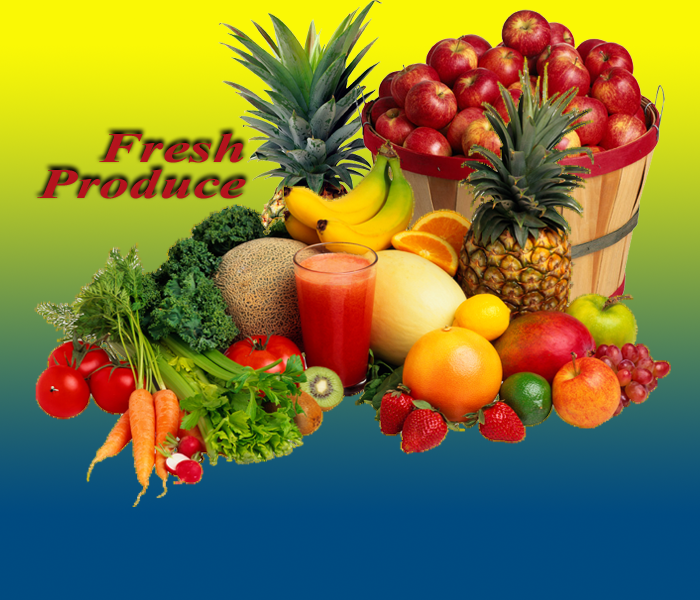
<style>
.page{position:relative;width:700px;height:600px}
.page>*{position:absolute;margin:0}
.t1{font:42px/36px "TimesNewRomanPS-BoldItalicMT";color:#b4121c;scale:1.43 1}
</style>
<div class="page">
<p class="t1" style="left:37px;top:133px;width:209px;height:66px;text-align:right">Fresh<br>Produce</p>
</div>
